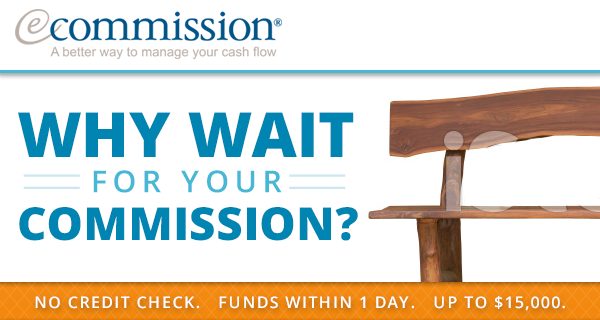
<style>
.page{position:relative;width:600px;height:320px;background:#ffffff}
.page>*{position:absolute;margin:0}
.t1{font:62.2px "OpenSans-Extrabold";color:#0085b2;text-transform:uppercase}
.t2{font:30.1px "OpenSans-Semibold";letter-spacing:0.2em;color:#46b7d5;text-transform:uppercase}
.t3{font:45.6px "OpenSans-Extrabold";color:#0085b2;text-transform:uppercase}
.t4{font:16px "OpenSans-Semibold";letter-spacing:0.1em;color:#ffffff;text-transform:uppercase}
</style>
<div class="page">
<p class="t1" style="left:18px;top:112px;width:336px;height:45px">Why Wait</p>
<p class="t2" style="left:93px;top:170px;width:189px;height:23px">For Your</p>
<p class="t3" style="left:19px;top:207px;width:339px;height:34px">Commission?</p>
<p class="t4" style="left:35px;top:296px;width:530px;height:15px">No credit check.   Funds within 1 day.   Up to $15,000.</p>
</div>
